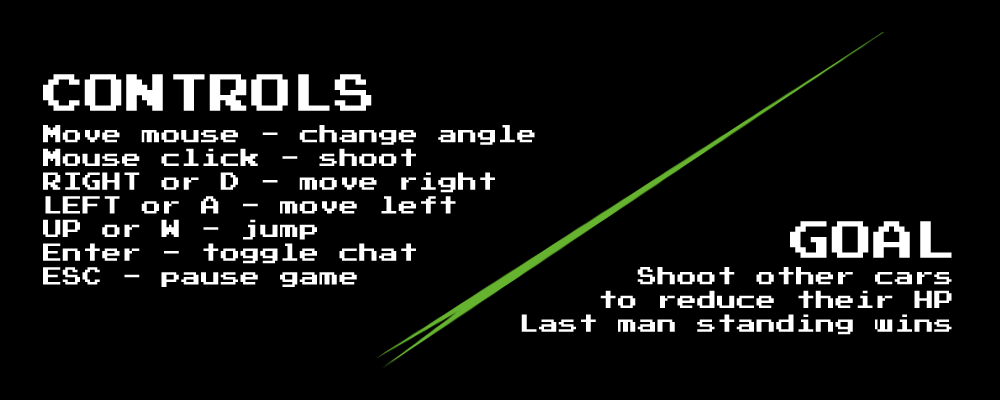
<style>
.page{position:relative;width:1000px;height:400px;background:#000000}
.page>*{position:absolute;margin:0}
.t1{font:41.7px "PressStart2P-Regular";color:#ffffff}
.t2{font:19.8px "PressStart2P-Regular";color:#ffffff}
</style>
<div class="page">
<p class="t1" style="left:43px;top:74px;width:329px;height:37px">CONTROLS</p>
<p class="t2" style="left:43px;top:125px;width:492px;height:162px">Move mouse - change angle<br>Mouse click - shoot<br>RIGHT or D - move right<br>LEFT or A - move left<br>UP or W - jump<br>Enter - toggle chat<br>ESC - pause game</p>
<p class="t1" style="left:790px;top:221px;width:162px;height:37px">GOAL</p>
<p class="t2" style="left:521px;top:267px;width:431px;height:68px;text-align:right">Shoot other cars<br>to reduce their HP<br>Last man standing wins</p>
</div>
